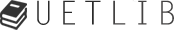
<style>
.page{position:relative;width:194px;height:30px;background:#ffffff}
.page>*{position:absolute;margin:0}
.t1{font:33px "VnLetterGothic";letter-spacing:0.15em;color:#434242}
.t2{font:33px "VnLetterGothic";letter-spacing:0.15em;color:#2a2a2a}
</style>
<div class="page">
<p class="t1" style="left:37px;top:0px;width:137px;height:25px"><span class="t2">UET</span>LIBB</p>
</div>
